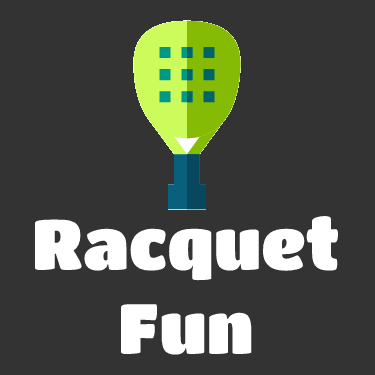
<style>
.page{position:relative;width:375px;height:375px;background:#333333}
.page>*{position:absolute;margin:0}
.t1{font:70px "TitanOne";color:#ffffff}
</style>
<div class="page">
<p class="t1" style="left:35px;top:216px;width:304px;height:139px;text-align:center">Racquet<br>Fun</p>
</div>
